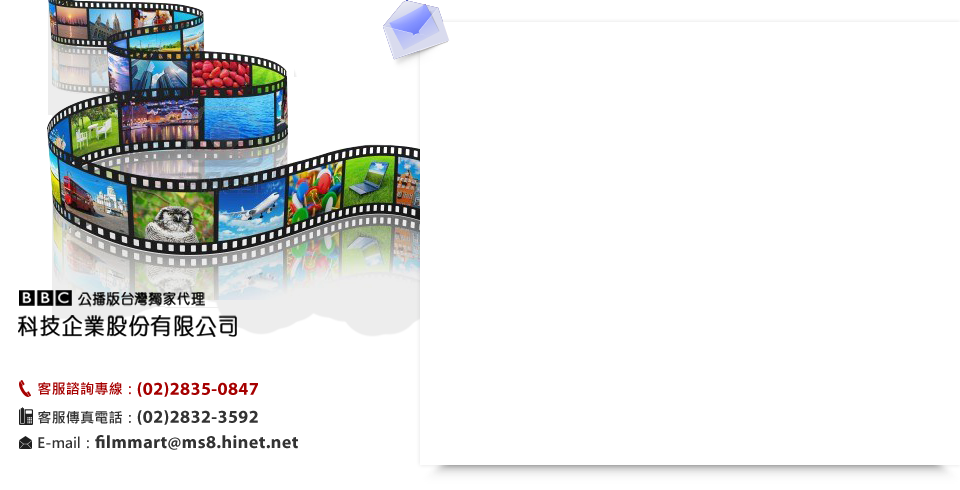
<style>
.page{position:relative;width:960px;height:490px;background:#ffffff}
.page>*{position:absolute;margin:0}
.t1{font:14.3px "MicrosoftJhengHeiBold";color:#a60000}
.t2{font:14.3px "MicrosoftJhengHeiBold";letter-spacing:0.1em;color:#a60000}
.t3{font:18px "MyriadPro-Bold";letter-spacing:0.025em;color:#a60000}
.t4{font:14.3px "MicrosoftJhengHeiBold";color:#333333}
.t5{font:18px "MyriadPro-Bold";letter-spacing:0.025em;color:#333333}
</style>
<div class="page">
<p class="t1" style="left:38px;top:382px;width:93px;height:13px">客服諮詢專線<span class="t2">：</span></p>
<p class="t3" style="left:137px;top:382px;width:121px;height:15px">(02)2835-0847</p>
<p class="t4" style="left:38px;top:411px;width:93px;height:13px">客服傳真電話：</p>
<p class="t5" style="left:137px;top:410px;width:121px;height:15px">(02)2832-3592</p>
<p class="t5" style="left:38px;top:435px;width:260px;height:15px"><span class="t4">E-mail：</span>filmmart@ms8.hinet.net</p>
</div>
